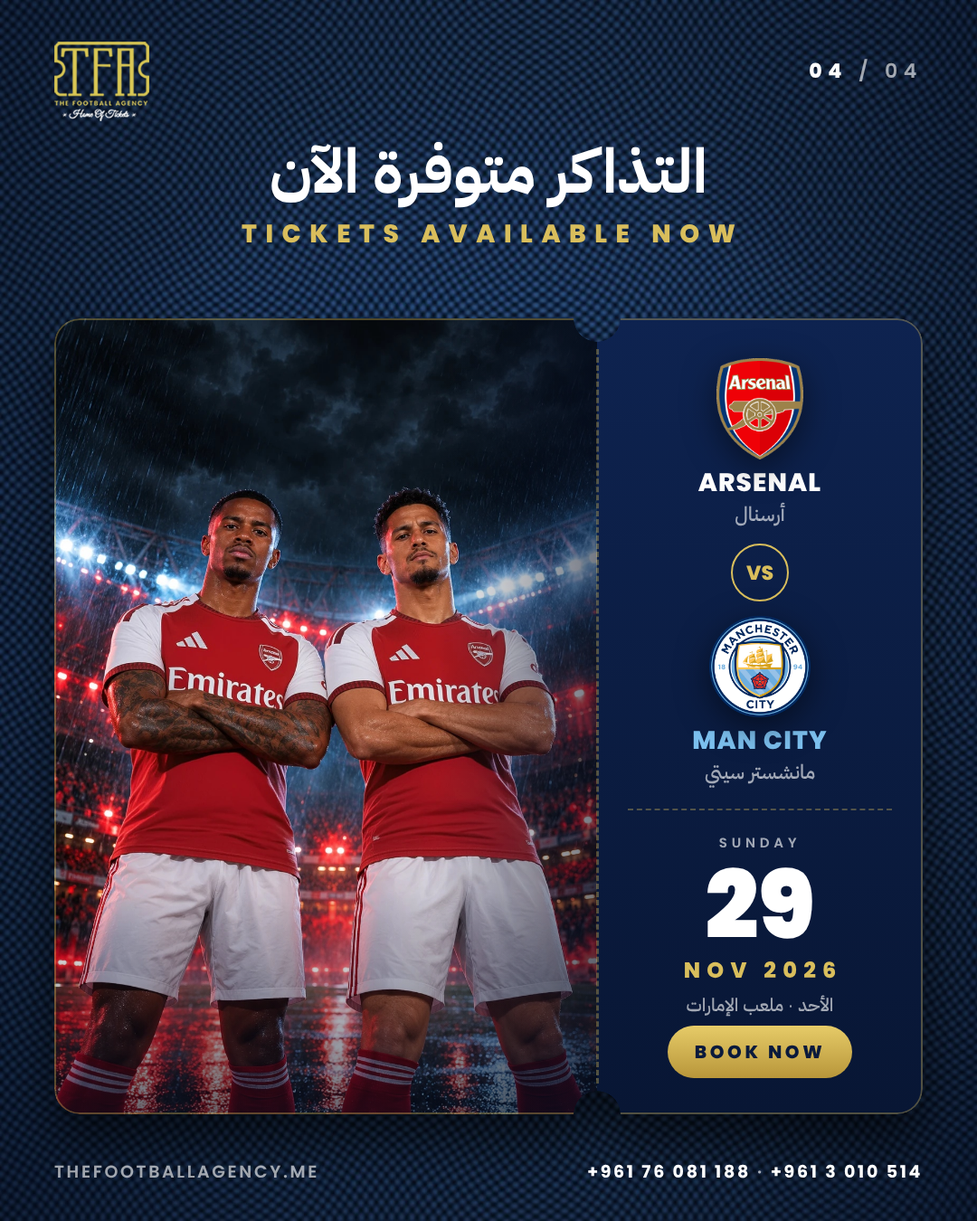
<style>
.page{position:relative;width:977px;height:1221px}
.page>*{position:absolute;margin:0}
.t1{font:19.9px "Poppins-SemiBold";letter-spacing:0.3em;color:#ffffff}
.t2{font:19.9px "Poppins-ExtraBold";letter-spacing:0.3em;color:#ffffff}
.t3{font:61.5px "IBMPlexSansArabic-Bold";color:#ffffff}
.t4{font:25.3px "Poppins-ExtraBold";letter-spacing:0.34em;color:#d9be5c}
.t5{font:25.3px "Poppins-ExtraBold";letter-spacing:0.04em;color:#ffffff}
.t6{font:19.9px "IBMPlexSansArabic-Medium"}
.t7{font:19.9px "Poppins-ExtraBold";color:#d9be5c}
.t8{font:25.3px "Poppins-ExtraBold";letter-spacing:0.04em;color:#7cc0ee}
.t9{font:13.6px "Poppins-SemiBold";letter-spacing:0.32em}
.t10{font:94.1px "Poppins-Black";color:#ffffff}
.t11{font:21.7px "Poppins-ExtraBold";letter-spacing:0.3em;color:#d9be5c}
.t12{font:18.1px "IBMPlexSansArabic-Medium"}
.t13{font:18.1px "Poppins-ExtraBold";letter-spacing:0.18em;color:#0a1a3c}
.t14{font:17.2px "Poppins-SemiBold";letter-spacing:0.14em}
.t15{font:17.2px "Poppins-Bold";letter-spacing:0.14em;color:#ffffff}
.t16{font:17.2px "Poppins-SemiBold";letter-spacing:0.14em;color:#ffffff}
</style>
<div class="page">
<p class="t1" style="left:809px;top:59px;width:107px;height:22px"><span class="t2">04</span> / 04</p>
<p class="t3" style="left:271px;top:142px;width:433px;height:66px">التذاكر متوفرة الآن</p>
<p class="t4" style="left:241px;top:224px;width:494px;height:19px">TICKETS AVAILABLE NOW</p>
<p class="t5" style="left:698px;top:473px;width:122px;height:19px">ARSENAL</p>
<p class="t6" style="left:735px;top:502px;width:50px;height:24px">أرسنال</p>
<p class="t7" style="left:746px;top:565px;width:27px;height:16px">VS</p>
<p class="t8" style="left:693px;top:731px;width:134px;height:19px">MAN CITY</p>
<p class="t6" style="left:704px;top:763px;width:111px;height:25px">مانشستر سيتي</p>
<p class="t9" style="left:719px;top:837px;width:78px;height:10px">SUNDAY</p>
<p class="t10" style="left:707px;top:867px;width:105px;height:72px">29</p>
<p class="t11" style="left:685px;top:961px;width:151px;height:18px">NOV 2026</p>
<p class="t12" style="left:686px;top:995px;width:146px;height:21px">الأحد · ملعب الإمارات</p>
<p class="t13" style="left:695px;top:1045px;width:127px;height:14px">BOOK NOW</p>
<p class="t14" style="left:54px;top:1165px;width:263px;height:13px">THEFOOTBALLAGENCY.ME</p>
<p class="t15" style="left:588px;top:1164px;width:332px;height:14px">+961 76 081 188<span class="t16"> · </span>+961 3 010 514</p>
</div>
